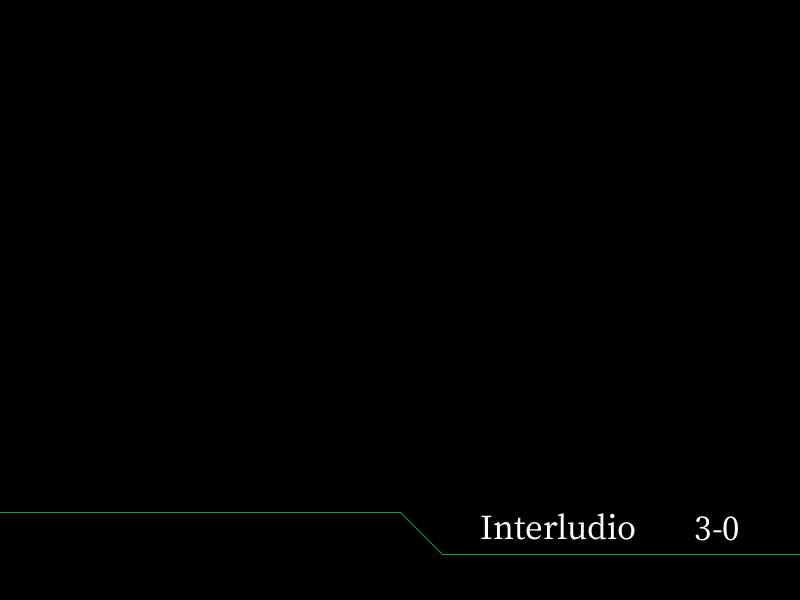
<style>
.page{position:relative;width:800px;height:600px;background:#000000}
.page>*{position:absolute;margin:0}
.t1{font:38px "OfficialFateFont-Medium";color:#ffffff}
</style>
<div class="page">
<p class="t1" style="left:481px;top:513px;width:154px;height:27px">Interludio</p>
<p class="t1" style="left:695px;top:516px;width:43px;height:25px">3-0</p>
</div>
